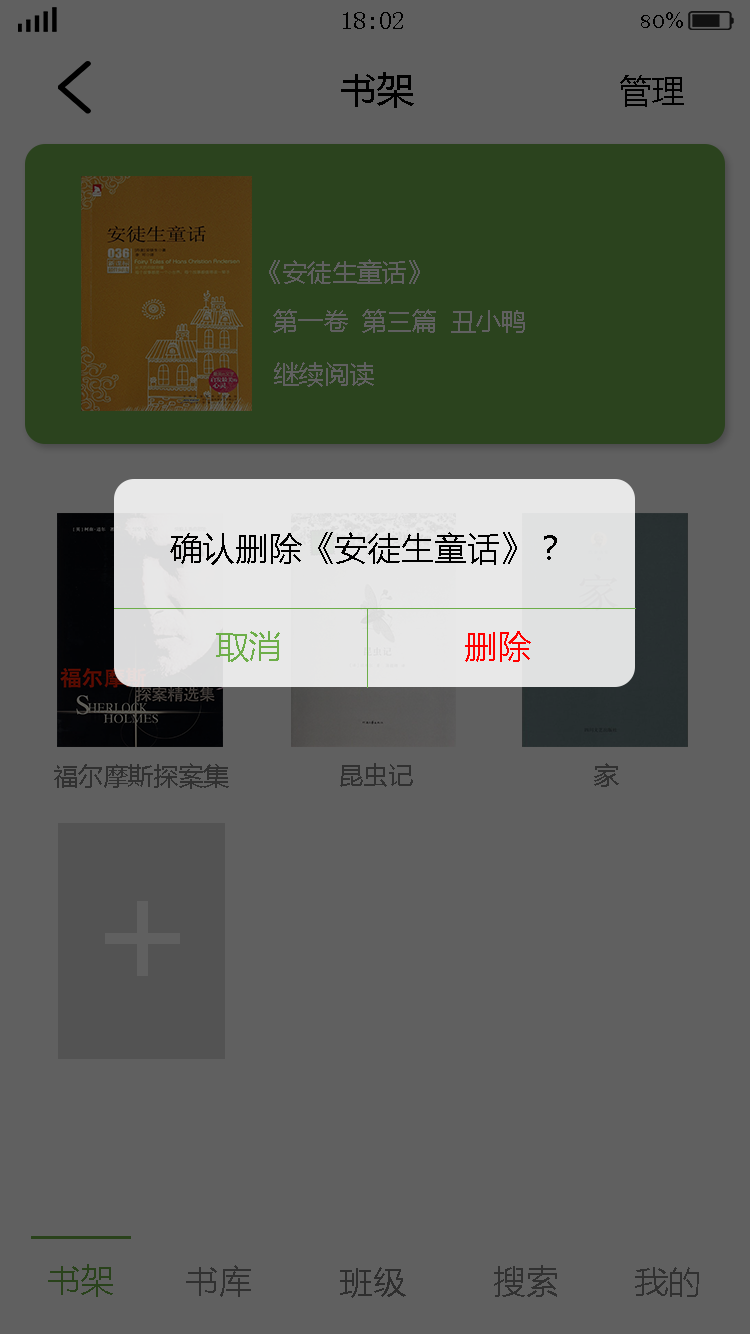
<style>
.page{position:relative;width:750px;height:1334px;background:#606060}
.page>*{position:absolute;margin:0}
.t1{font:25px "SimSun";color:#000000}
.t2{font:25px "BellMT";color:#000000}
.t3{font:37.5px "MicrosoftYaHei";color:#000000}
.t4{font:33.3px "MicrosoftYaHei";color:#000000}
.t5{font:25px "MicrosoftYaHei";color:#606060}
.t6{font:33.3px "MicrosoftYaHei";color:#6dae49}
.t7{font:33.3px "MicrosoftYaHei";color:#ff0000}
.t8{font:25px "MicrosoftYaHei";color:#313131}
.t9{font:150px "MicrosoftYaHei";color:#606060}
.t10{font:33.3px "MicrosoftYaHei";color:#29421b}
.t11{font:33.3px "MicrosoftYaHei";color:#313131}
.t12{font:33.3px "MicrosoftYaHei";color:#2e2e2e}
</style>
<div class="page">
<p class="t1" style="left:343px;top:12px;width:60px;height:17px">18:02</p>
<p class="t2" style="left:641px;top:12px;width:42px;height:16px">80%</p>
<p class="t3" style="left:341px;top:72px;width:73px;height:36px">书架</p>
<p class="t4" style="left:620px;top:75px;width:64px;height:32px">管理</p>
<p class="t5" style="left:269px;top:259px;width:151px;height:25px">《安徒生童话》</p>
<p class="t5" style="left:273px;top:309px;width:252px;height:24px">第一卷  第三篇  丑小鸭</p>
<p class="t5" style="left:274px;top:362px;width:100px;height:25px">继续阅读</p>
<p class="t4" style="left:170px;top:532px;width:387px;height:33px">确认删除《安徒生童话》？</p>
<p class="t6" style="left:216px;top:631px;width:64px;height:31px">取消</p>
<p class="t7" style="left:465px;top:631px;width:66px;height:31px">删除</p>
<p class="t8" style="left:54px;top:763px;width:175px;height:26px">福尔摩斯探案集</p>
<p class="t8" style="left:340px;top:763px;width:73px;height:24px">昆虫记</p>
<p class="t8" style="left:594px;top:763px;width:25px;height:24px">家</p>
<p class="t9" style="left:105px;top:901px;width:75px;height:75px">+</p>
<p class="t10" style="left:48px;top:1264px;width:65px;height:33px">书架</p>
<p class="t11" style="left:186px;top:1265px;width:65px;height:32px">书库</p>
<p class="t11" style="left:494px;top:1265px;width:63px;height:32px">搜索</p>
<p class="t12" style="left:340px;top:1267px;width:66px;height:31px">班级</p>
<p class="t11" style="left:635px;top:1267px;width:64px;height:30px">我的</p>
</div>
